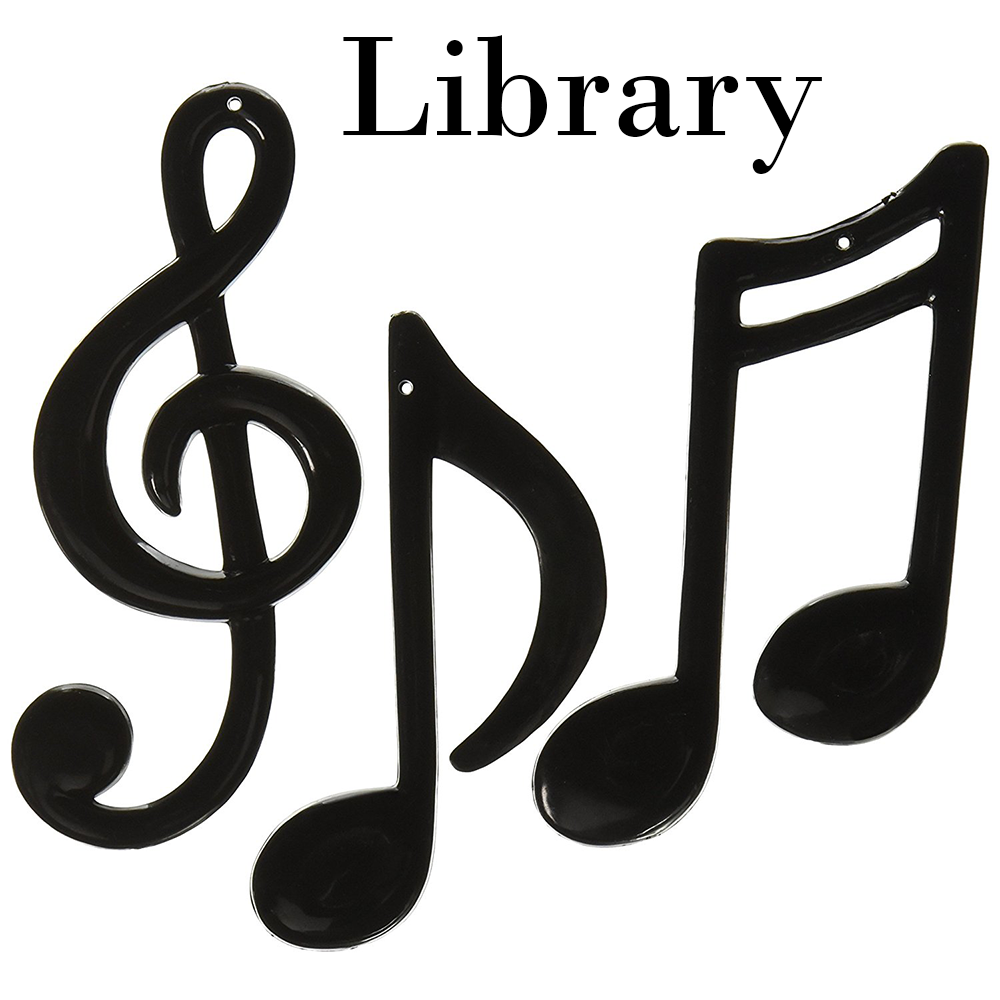
<style>
.page{position:relative;width:1000px;height:1000px;background:#ffffff}
.page>*{position:absolute;margin:0}
.t1{font:150px "BodoniMT";color:#000000}
</style>
<div class="page">
<p class="t1" style="left:343px;top:35px;width:479px;height:139px">Library</p>
</div>
